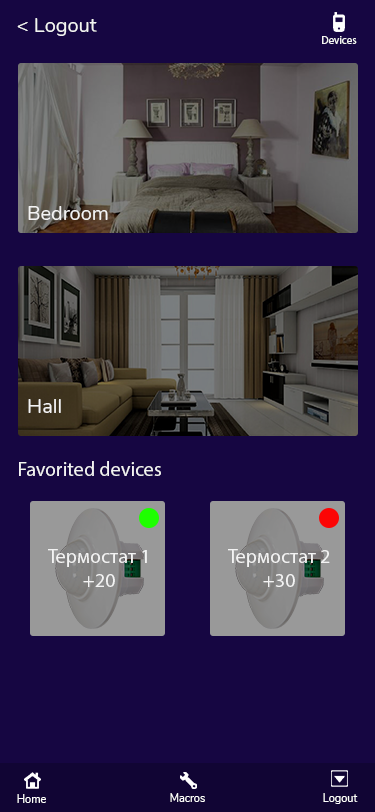
<style>
.page{position:relative;width:375px;height:812px;background:#160642}
.page>*{position:absolute;margin:0}
.t1{font:20px "Nunito-Regular";color:#f3f3f3}
.t2{font:11px "MyriadPro-Regular";color:#f3f3f3}
.t3{font:20px "MyriadPro-Regular";color:#f3f3f3}
.t4{font:11px "Nunito-Regular";color:#ffffff}
</style>
<div class="page">
<p class="t1" style="left:17px;top:18px;width:80px;height:18px">&lt; Logout</p>
<p class="t2" style="left:322px;top:36px;width:35px;height:8px">Devices</p>
<p class="t1" style="left:28px;top:206px;width:80px;height:14px">Bedroom</p>
<p class="t1" style="left:28px;top:399px;width:33px;height:14px">Hall</p>
<p class="t3" style="left:19px;top:461px;width:142px;height:15px">Favorited devices</p>
<p class="t3" style="left:48px;top:549px;width:99px;height:38px;text-align:center">Термостат 1<br>+20</p>
<p class="t3" style="left:228px;top:549px;width:102px;height:38px;text-align:center">Термостат 2<br>+30</p>
<p class="t4" style="left:17px;top:794px;width:29px;height:9px">Home</p>
<p class="t4" style="left:170px;top:793px;width:35px;height:9px">Macros</p>
<p class="t4" style="left:323px;top:793px;width:35px;height:11px">Logout</p>
</div>
